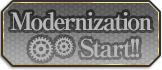
<style>
.page{position:relative;width:162px;height:70px}
.page>*{position:absolute;margin:0}
.t1{font:24px "RyuminPro-ExBold";letter-spacing:-0.08em;color:#b8b8b8}
</style>
<div class="page">
<p class="t1" style="left:10px;top:12px;width:142px;height:19px">Modernization</p>
<p class="t1" style="left:80px;top:38px;width:59px;height:20px">Start!!</p>
</div>
